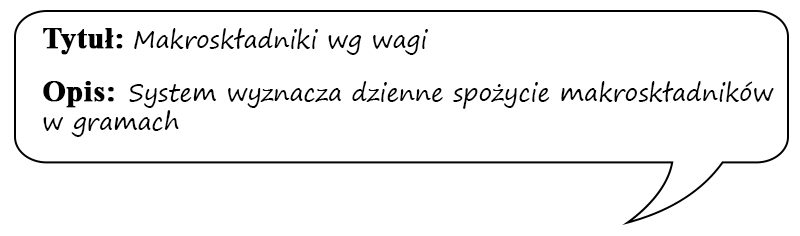
<style>
.page{position:relative;width:800px;height:236px;background:#ffffff}
.page>*{position:absolute;margin:0}
.t1{font:24px "SegoePrint";color:#000000}
.t2{font:30px "TimesNewRomanPS-BoldMT";color:#000000;font-weight:bold}
</style>
<div class="page">
<p class="t1" style="left:43px;top:28px;width:731px;height:109px"><span class="t2">Tytuł: </span>Makroskładniki wg wagi<br><br><span class="t2">Opis:  </span>System wyznacza dzienne spożycie makroskładników w gramach</p>
</div>
